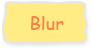
<style>
.page{position:relative;width:92px;height:49px;background:#ffec84}
.page>*{position:absolute;margin:0}
.t1{font:18px "ComicSansMS";color:#ff8047}
</style>
<div class="page">
<p class="t1" style="left:31px;top:16px;width:33px;height:14px">Blur</p>
</div>
